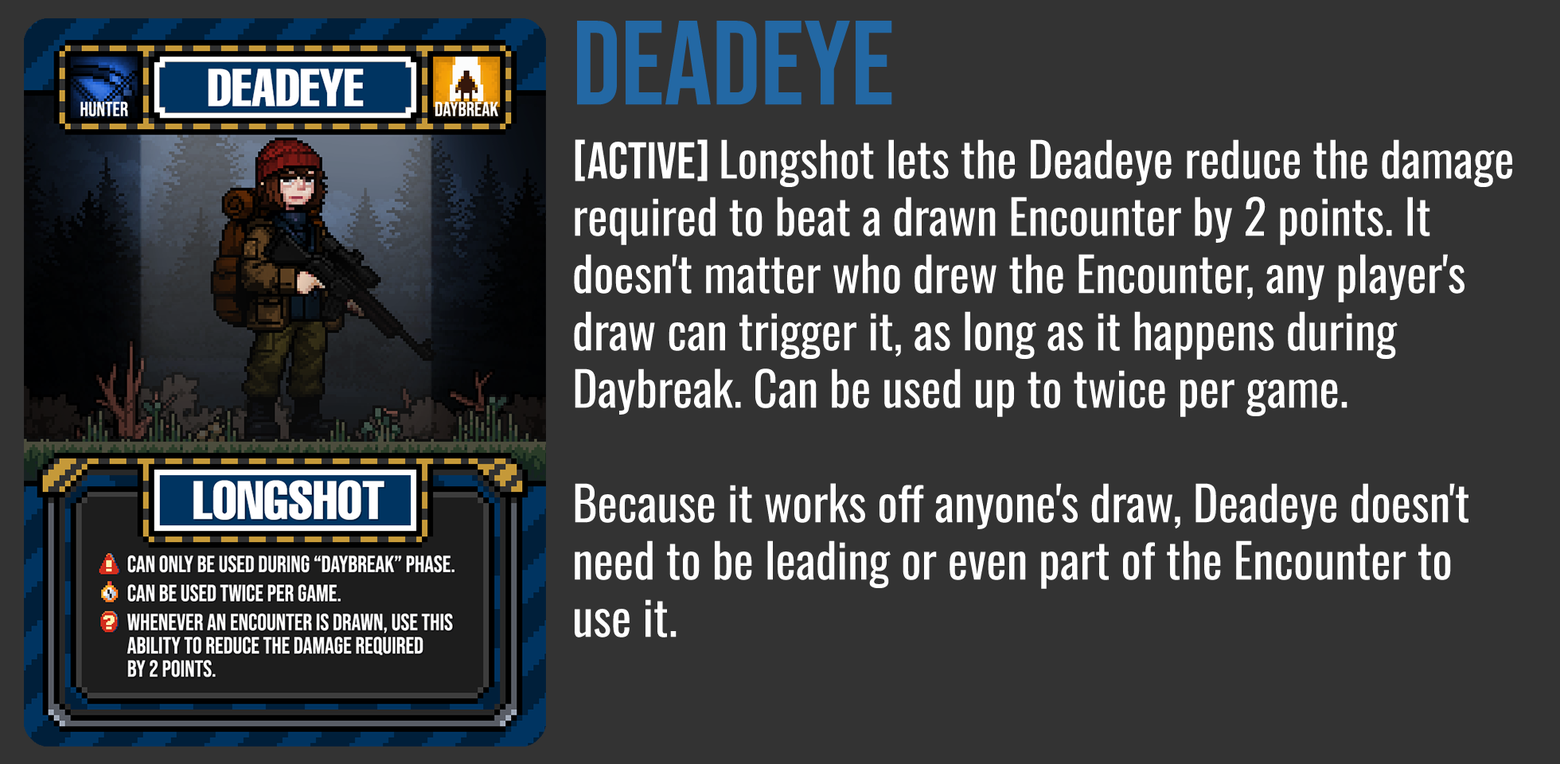
<style>
.page{position:relative;width:1560px;height:764px;background:#333333}
.page>*{position:absolute;margin:0}
.t1{font:119.4px "BebasNeue-Regular";color:#2368a4}
.t2{font:47.8px "Oswald-Regular";color:#ffffff}
.t3{font:51.7px "BebasNeue-Regular";color:#ffffff}
</style>
<div class="page">
<p class="t1" style="left:577px;top:21px;width:315px;height:84px">DEADEYE</p>
<p class="t2" style="left:574px;top:139px;width:939px;height:499px"><span class="t3">[ACTIVE] </span>Longshot lets the Deadeye reduce the damage required to beat a drawn Encounter by 2 points. It doesn't matter who drew the Encounter, any player's draw can trigger it, as long as it happens during Daybreak. Can be used up to twice per game.<br><br>Because it works off anyone's draw, Deadeye doesn't need to be leading or even part of the Encounter to use it.</p>
</div>
